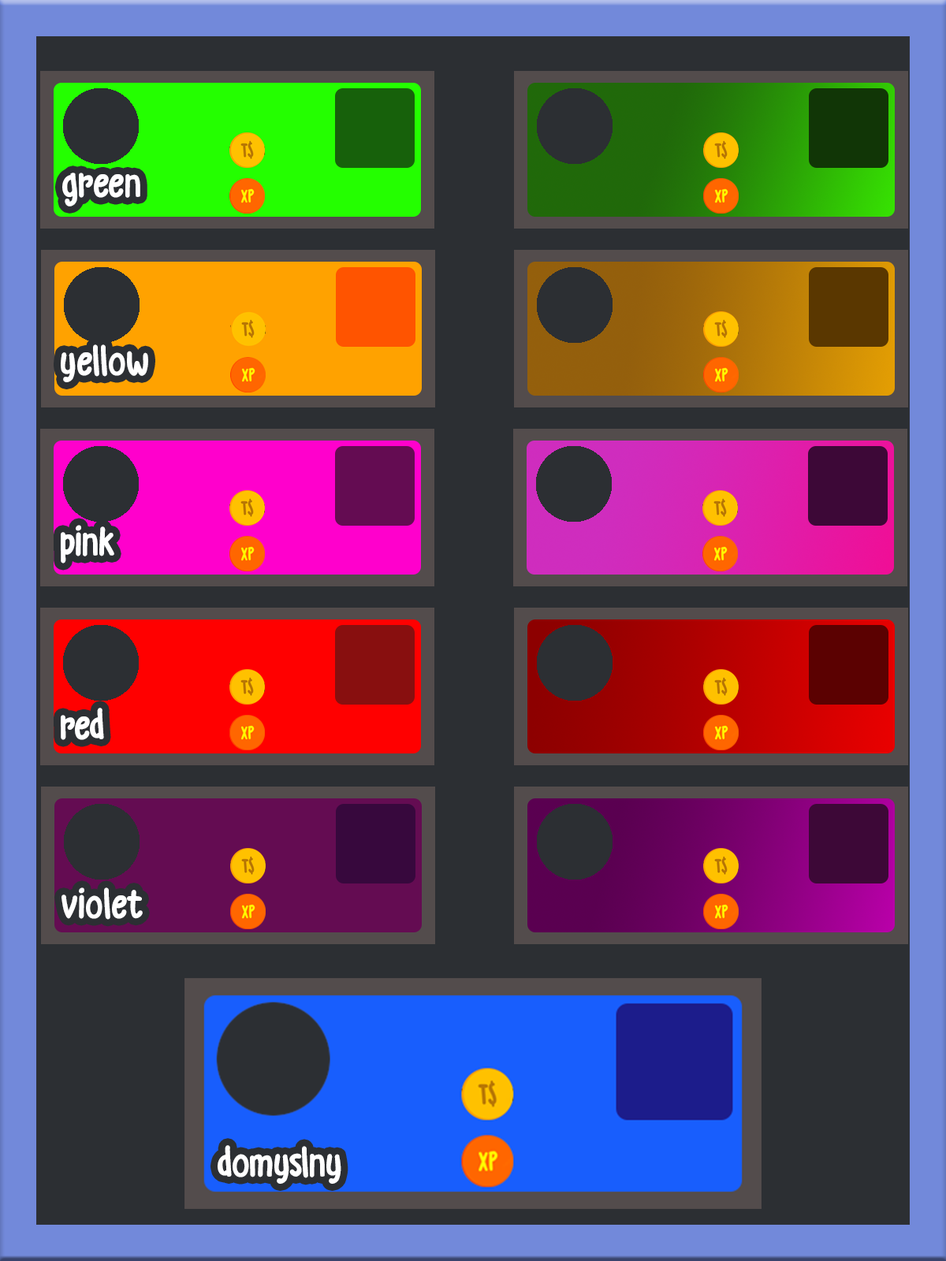
<style>
.page{position:relative;width:946px;height:1261px;background:#2c2f33}
.page>*{position:absolute;margin:0}
.t1{font:39.4px "DKGrumpyTiger-Regular";color:#ffffff}
</style>
<div class="page">
<p class="t1" style="left:62px;top:173px;width:78px;height:33px">green</p>
<p class="t1" style="left:61px;top:344px;width:87px;height:38px">yellow</p>
<p class="t1" style="left:61px;top:525px;width:53px;height:38px">pink</p>
<p class="t1" style="left:61px;top:708px;width:43px;height:32px">red</p>
<p class="t1" style="left:61px;top:887px;width:82px;height:33px">violet</p>
<p class="t1" style="left:218px;top:1145px;width:123px;height:39px">domyslny</p>
</div>
